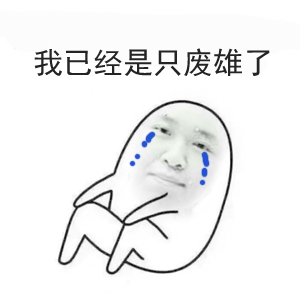
<style>
.page{position:relative;width:300px;height:300px;background:#ffffff}
.page>*{position:absolute;margin:0}
.t1{font:30px "SimHei";color:#242424;text-transform:uppercase}
</style>
<div class="page">
<p class="t1" style="left:34px;top:48px;width:236px;height:29px">我已经是只废雄了</p>
</div>
